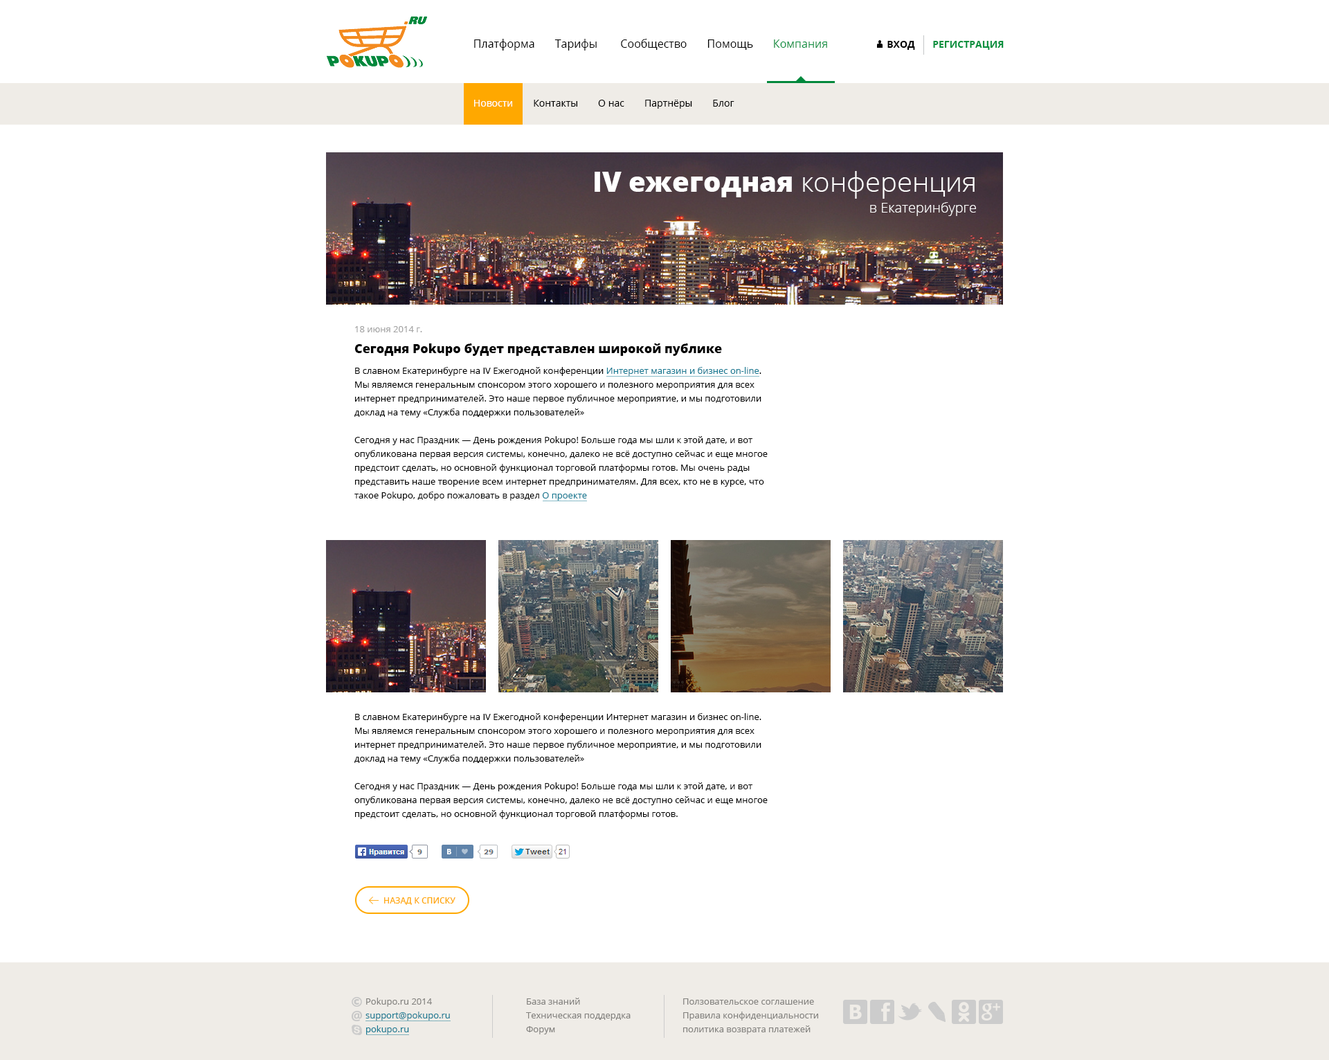
<style>
.page{position:relative;width:1329px;height:1060px;background:#ffffff}
.page>*{position:absolute;margin:0}
.t1{font:11.1px "OpenSans";color:#010101}
.t2{font:11.1px "OpenSans";color:#018f3c}
.t3{font:9.7px "OpenSans-Bold";color:#02903d;text-transform:uppercase}
.t4{font:9.7px "OpenSans-Bold";color:#000000;text-transform:uppercase}
.t5{font:9.7px "OpenSans";color:#000000}
.t6{font:9.7px "OpenSans";color:#ffffff}
.t7{font:9px "OpenSans";color:#a3a3a3}
.t8{font:12.5px "OpenSans-Extrabold";color:#000000}
.t9{font:9px/13.8px "OpenSans";color:#000000}
.t10{font:9px/13.8px "OpenSans";color:#177a93}
.t11{font:8.3px "OpenSans-Semibold";color:#ffa800;text-transform:uppercase}
.t12{font:9px/13.8px "OpenSans";color:#83827f}
</style>
<div class="page">
<p class="t1" style="left:474px;top:39px;width:354px;height:12px">Платформа       Тарифы        Сообщество       Помощь       Компания</p>
<p class="t2" style="left:774px;top:39px;width:53px;height:9px">Компания</p>
<p class="t3" style="left:888px;top:41px;width:116px;height:9px"><span class="t4">Вход       </span>регистрация</p>
<p class="t5" style="left:474px;top:100px;width:261px;height:9px"><span class="t6">Новости       </span>Контакты       О нас       Партнёры       Блог</p>
<p class="t7" style="left:355px;top:326px;width:67px;height:6px">18 июня 2014 г.</p>
<p class="t8" style="left:354px;top:343px;width:368px;height:13px">Сегодня Pokupo будет представлен широкой публике</p>
<p class="t9" style="left:354px;top:367px;width:414px;height:134px">В славном Екатеринбурге на IV Ежегодной конференции <span class="t10">Интернет магазин и бизнес on-line</span>. Мы являемся генеральным спонсором этого хорошего и полезного мероприятия для всех интернет предпринимателей. Это наше первое публичное мероприятие, и мы подготовили доклад на тему «Служба поддержки пользователей»<br><br>Сегодня у нас Праздник — День рождения Pokupo! Больше года мы шли к этой дате, и вот опубликована первая версия системы, конечно, далеко не всё доступно сейчас и еще многое предстоит сделать, но основной функционал торговой платформы готов. Мы очень рады представить наше творение всем интернет предпринимателям. Для всех, кто не в курсе, что такое Pokupo, добро пожаловать в раздел <span class="t10">О проекте</span></p>
<p class="t9" style="left:354px;top:713px;width:414px;height:106px">В славном Екатеринбурге на IV Ежегодной конференции Интернет магазин и бизнес on-line. Мы являемся генеральным спонсором этого хорошего и полезного мероприятия для всех интернет предпринимателей. Это наше первое публичное мероприятие, и мы подготовили доклад на тему «Служба поддержки пользователей»<br><br>Сегодня у нас Праздник — День рождения Pokupo! Больше года мы шли к этой дате, и вот опубликована первая версия системы, конечно, далеко не всё доступно сейчас и еще многое предстоит сделать, но основной функционал торговой платформы готов.</p>
<p class="t11" style="left:384px;top:897px;width:72px;height:8px">назад к списку</p>
<p class="t10" style="left:366px;top:998px;width:84px;height:36px"><span class="t12"><br>Pokupo.ru 2014<br></span>support@pokupo.ru<br>pokupo.ru</p>
<p class="t12" style="left:526px;top:998px;width:105px;height:36px">База знаний<br>Техническая поддердка<br>Форум</p>
<p class="t12" style="left:683px;top:998px;width:135px;height:36px">Ползовательское соглашение<br>Правила конфиденциальности<br>политика возврата платежей</p>
</div>
